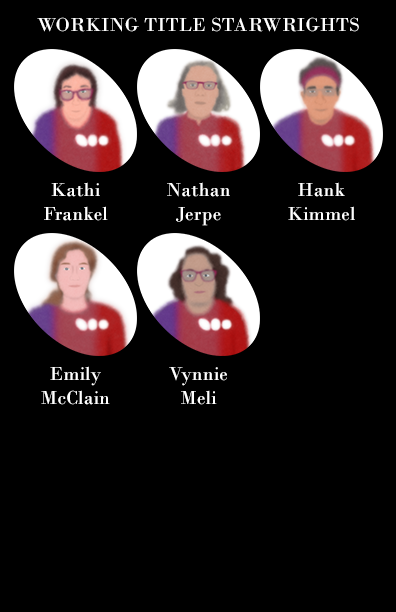
<style>
.page{position:relative;width:396px;height:612px;background:#000000}
.page>*{position:absolute;margin:0}
.t1{font:20px "BodoniMT";letter-spacing:0.005em;color:#ffffff}
</style>
<div class="page">
<p class="t1" style="left:37px;top:17px;width:322px;height:15px">WORKING TITLE STARWRIGHTS</p>
<p class="t1" style="left:44px;top:182px;width:64px;height:39px;text-align:center">Kathi<br>Frankel</p>
<p class="t1" style="left:167px;top:182px;width:63px;height:44px;text-align:center">Nathan<br>Jerpe</p>
<p class="t1" style="left:288px;top:182px;width:67px;height:39px;text-align:center">Hank<br>Kimmel</p>
<p class="t1" style="left:41px;top:366px;width:69px;height:39px;text-align:center">Emily<br>McClain</p>
<p class="t1" style="left:169px;top:367px;width:58px;height:38px;text-align:center">Vynnie<br>Meli</p>
</div>
